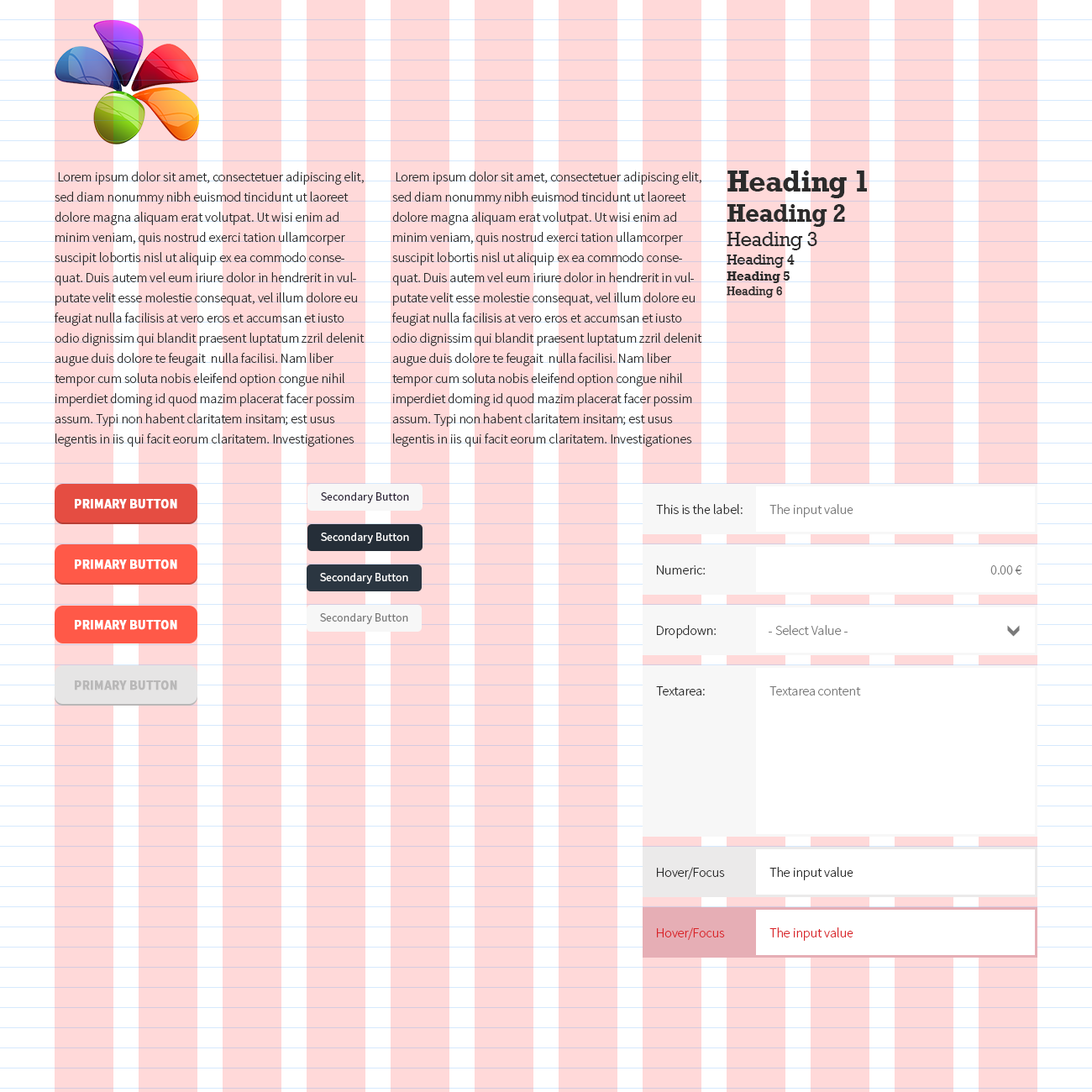
<style>
.page{position:relative;width:1092px;height:1092px;background:#ffffff}
.page>*{position:absolute;margin:0}
.t1{font:13.4px/20.2px "SourceSansPro-Light";color:#2b2b2b}
.t2{font:30.2px "Rockwell-Bold";letter-spacing:-0.025em;color:#2b2b2b}
.t3{font:25.2px "Rockwell-Bold";letter-spacing:-0.025em;color:#2b2b2b}
.t4{font:20.2px "Rockwell";letter-spacing:-0.025em;color:#2b2b2b}
.t5{font:15.1px "Rockwell";letter-spacing:-0.025em;color:#2b2b2b}
.t6{font:13.4px "Rockwell-Bold";letter-spacing:-0.025em;color:#2b2b2b}
.t7{font:11.8px "Rockwell";letter-spacing:-0.025em;color:#2b2b2b;font-weight:bold}
.t8{font:11.8px "SourceSansPro-Regular";color:#2d2439}
.t9{font:13.4px "SourceSansPro-Bold";color:#ffffff;font-weight:bold;scale:0.94 1}
.t10{font:13.4px "SourceSansPro-Light";color:#2b2b2b}
.t11{font:13.4px "SourceSansPro-Light";color:#7a7a7a}
.t12{font:11.8px "SourceSansPro-Regular";color:#ffffff}
.t13{font:11.8px "SourceSansPro-Regular";color:#fffefe}
.t14{font:11.8px "SourceSansPro-Regular";color:#7a7a7a}
.t15{font:13.4px "SourceSansPro-Bold";color:#b9b8b8;font-weight:bold;scale:0.94 1}
.t16{font:13.4px "SourceSansPro-Light";color:#d92328}
</style>
<div class="page">
<p class="t1" style="left:55px;top:171px;width:310px;height:276px">Lorem ipsum dolor sit amet, consectetuer adipiscing elit, sed diam nonummy nibh euismod tincidunt ut laoreet dolore magna aliquam erat volutpat. Ut wisi enim ad minim veniam, quis nostrud exerci tation ullamcorper suscipit lobortis nisl ut aliquip ex ea commodo consequat. Duis autem vel eum iriure dolor in hendrerit in vulputate velit esse molestie consequat, vel illum dolore eu feugiat nulla facilisis at vero eros et accumsan et iusto odio dignissim qui blandit praesent luptatum zzril delenit augue duis dolore te feugait  nulla facilisi. Nam liber tempor cum soluta nobis eleifend option congue nihil imperdiet doming id quod mazim placerat facer possim assum. Typi non habent claritatem insitam; est usus legentis in iis qui facit eorum claritatem. Investigationes demonstraverunt lectores legere me</p>
<p class="t1" style="left:392px;top:171px;width:310px;height:276px">Lorem ipsum dolor sit amet, consectetuer adipiscing elit, sed diam nonummy nibh euismod tincidunt ut laoreet dolore magna aliquam erat volutpat. Ut wisi enim ad minim veniam, quis nostrud exerci tation ullamcorper suscipit lobortis nisl ut aliquip ex ea commodo consequat. Duis autem vel eum iriure dolor in hendrerit in vulputate velit esse molestie consequat, vel illum dolore eu feugiat nulla facilisis at vero eros et accumsan et iusto odio dignissim qui blandit praesent luptatum zzril delenit augue duis dolore te feugait  nulla facilisi. Nam liber tempor cum soluta nobis eleifend option congue nihil imperdiet doming id quod mazim placerat facer possim assum. Typi non habent claritatem insitam; est usus legentis in iis qui facit eorum claritatem. Investigationes demonstraverunt lectores legere me</p>
<p class="t2" style="left:727px;top:171px;width:140px;height:127px">Heading 1<br><span class="t3">Heading 2<br></span><span class="t4">Heading 3<br></span><span class="t5">Heading 4<br></span><span class="t6">Heading 5<br></span><span class="t7">Heading 6</span></p>
<p class="t8" style="left:321px;top:492px;width:88px;height:11px">Secondary Button</p>
<p class="t9" style="left:75px;top:499px;width:102px;height:10px">PRIMARY BUTTON</p>
<p class="t10" style="left:656px;top:504px;width:87px;height:10px">This is the label:</p>
<p class="t11" style="left:769px;top:504px;width:84px;height:13px">The input value</p>
<p class="t12" style="left:321px;top:533px;width:88px;height:10px">Secondary Button</p>
<p class="t9" style="left:75px;top:559px;width:102px;height:11px">PRIMARY BUTTON</p>
<p class="t10" style="left:657px;top:565px;width:48px;height:10px">Numeric:</p>
<p class="t11" style="left:990px;top:565px;width:32px;height:10px">0.00 €</p>
<p class="t13" style="left:320px;top:573px;width:88px;height:11px">Secondary Button</p>
<p class="t14" style="left:320px;top:613px;width:88px;height:11px">Secondary Button</p>
<p class="t9" style="left:75px;top:620px;width:102px;height:10px">PRIMARY BUTTON</p>
<p class="t10" style="left:657px;top:625px;width:59px;height:13px">Dropdown:</p>
<p class="t11" style="left:769px;top:625px;width:79px;height:10px">- Select Value -</p>
<p class="t15" style="left:75px;top:680px;width:102px;height:10px">PRIMARY BUTTON</p>
<p class="t10" style="left:656px;top:686px;width:49px;height:10px">Textarea:</p>
<p class="t11" style="left:769px;top:686px;width:92px;height:10px">Textarea content</p>
<p class="t10" style="left:657px;top:867px;width:68px;height:12px">Hover/Focus</p>
<p class="t10" style="left:769px;top:867px;width:84px;height:13px">The input value</p>
<p class="t16" style="left:657px;top:927px;width:68px;height:13px">Hover/Focus</p>
<p class="t16" style="left:769px;top:927px;width:84px;height:14px">The input value</p>
</div>
